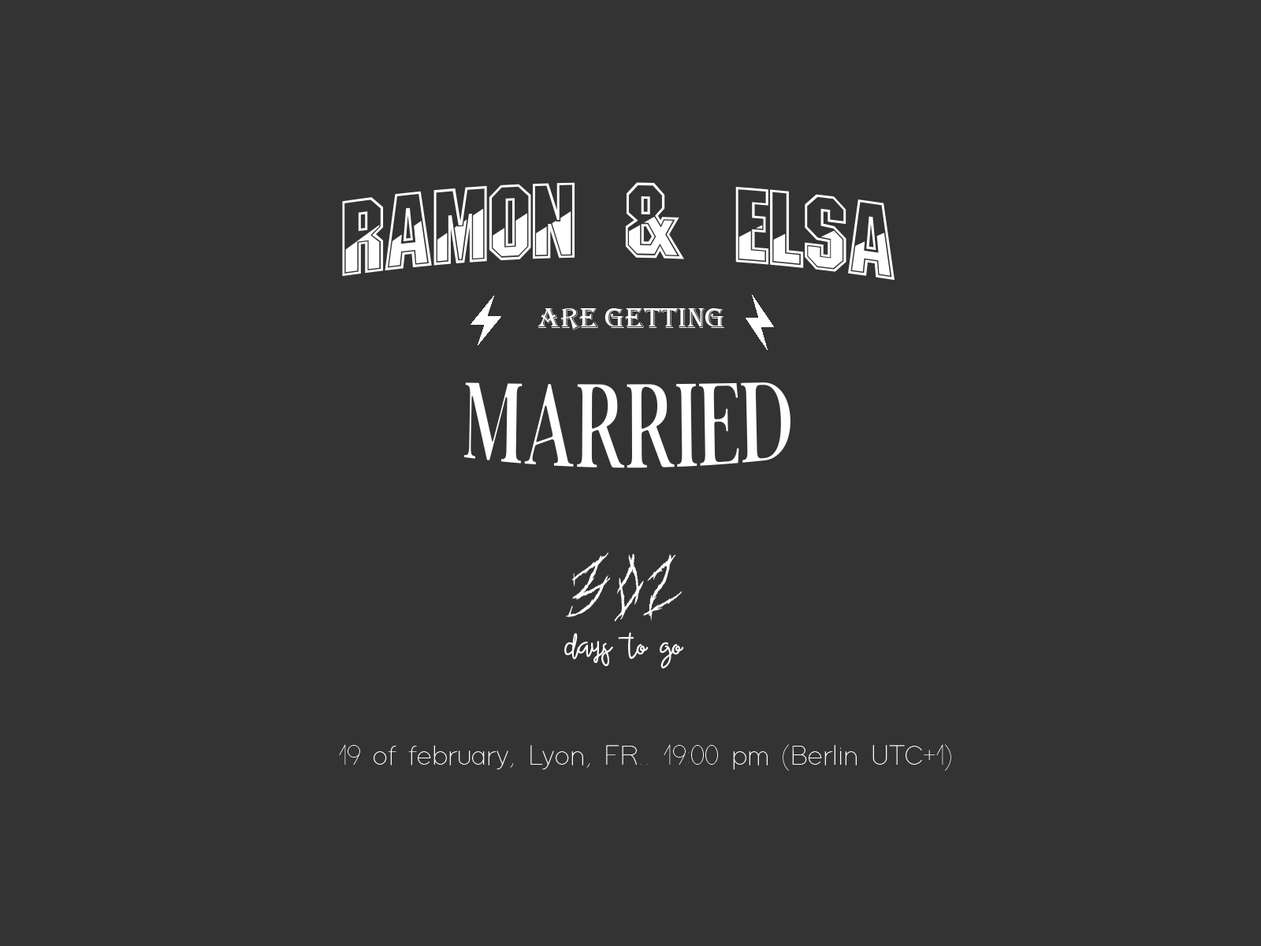
<style>
.page{position:relative;width:1261px;height:946px;background:#333333}
.page>*{position:absolute;margin:0}
.t1{font:101.2px "Gunmetal";color:#ffffff;scale:0.97 1}
.t2{font:29.8px "Algerian";color:#ffffff}
.t3{font:78.8px "Night";color:#ffffff}
.t4{font:82px "MetalShow";color:#fefefe}
.t5{font:28.4px "Adam";color:#ffffff}
</style>
<div class="page">
<p class="t1" style="left:342px;top:182px;width:552px;height:99px">Ramon &amp; Elsa</p>
<p class="t2" style="left:537px;top:308px;width:187px;height:22px">are getting</p>
<p class="t3" style="left:464px;top:382px;width:326px;height:86px">Married</p>
<p class="t4" style="left:566px;top:552px;width:116px;height:70px">302</p>
<p class="t5" style="left:339px;top:744px;width:612px;height:27px">19 of february, Lyon, FR.. 19:00 pm (Berlin UTC+1)</p>
</div>
